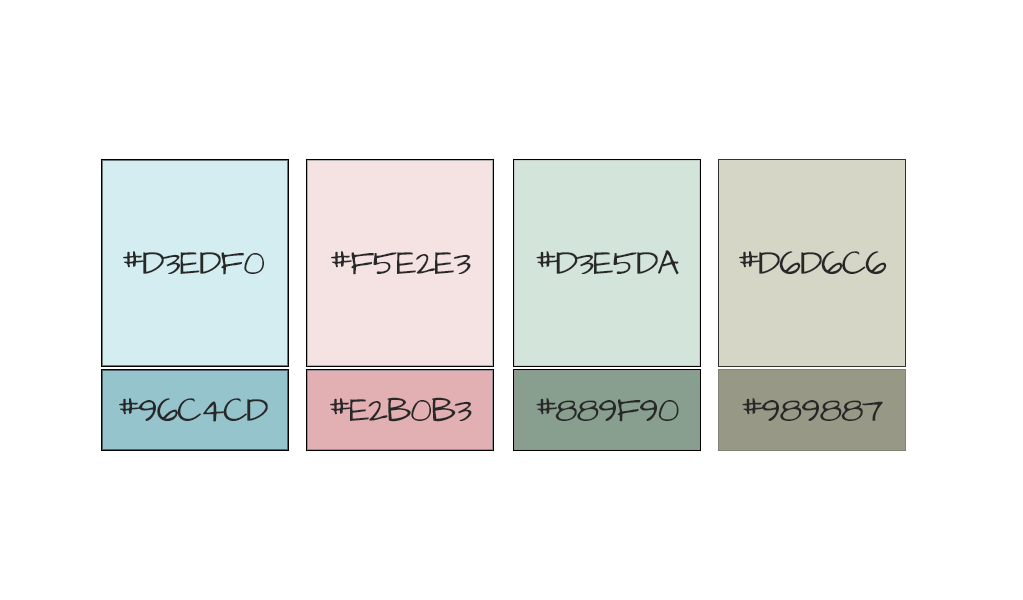
<style>
.page{position:relative;width:1023px;height:600px;background:#ffffff}
.page>*{position:absolute;margin:0}
.t1{font:28px "ArchitectsDaughter";letter-spacing:-0.05em;color:#282828}
</style>
<div class="page">
<p class="t1" style="left:123px;top:251px;width:141px;height:24px">#D3EDF0</p>
<p class="t1" style="left:331px;top:251px;width:140px;height:24px">#F5E2E3</p>
<p class="t1" style="left:536px;top:250px;width:143px;height:25px">#D3E5DA</p>
<p class="t1" style="left:739px;top:251px;width:148px;height:24px">#D6D6C6</p>
<p class="t1" style="left:119px;top:398px;width:149px;height:24px">#96C4CD</p>
<p class="t1" style="left:330px;top:397px;width:142px;height:25px">#E2B0B3</p>
<p class="t1" style="left:536px;top:398px;width:143px;height:24px">#889F90</p>
<p class="t1" style="left:742px;top:398px;width:141px;height:23px">#989887</p>
</div>
